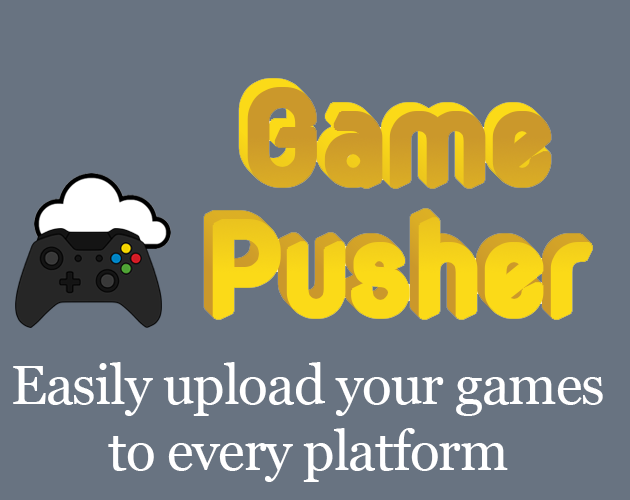
<style>
.page{position:relative;width:630px;height:500px;background:#687381}
.page>*{position:absolute;margin:0}
.t1{font:55px "Georgia";letter-spacing:-0.02em;color:#ffffff}
</style>
<div class="page">
<p class="t1" style="left:13px;top:362px;width:590px;height:120px;text-align:center">Easily upload your games<br>to every platform</p>
</div>
